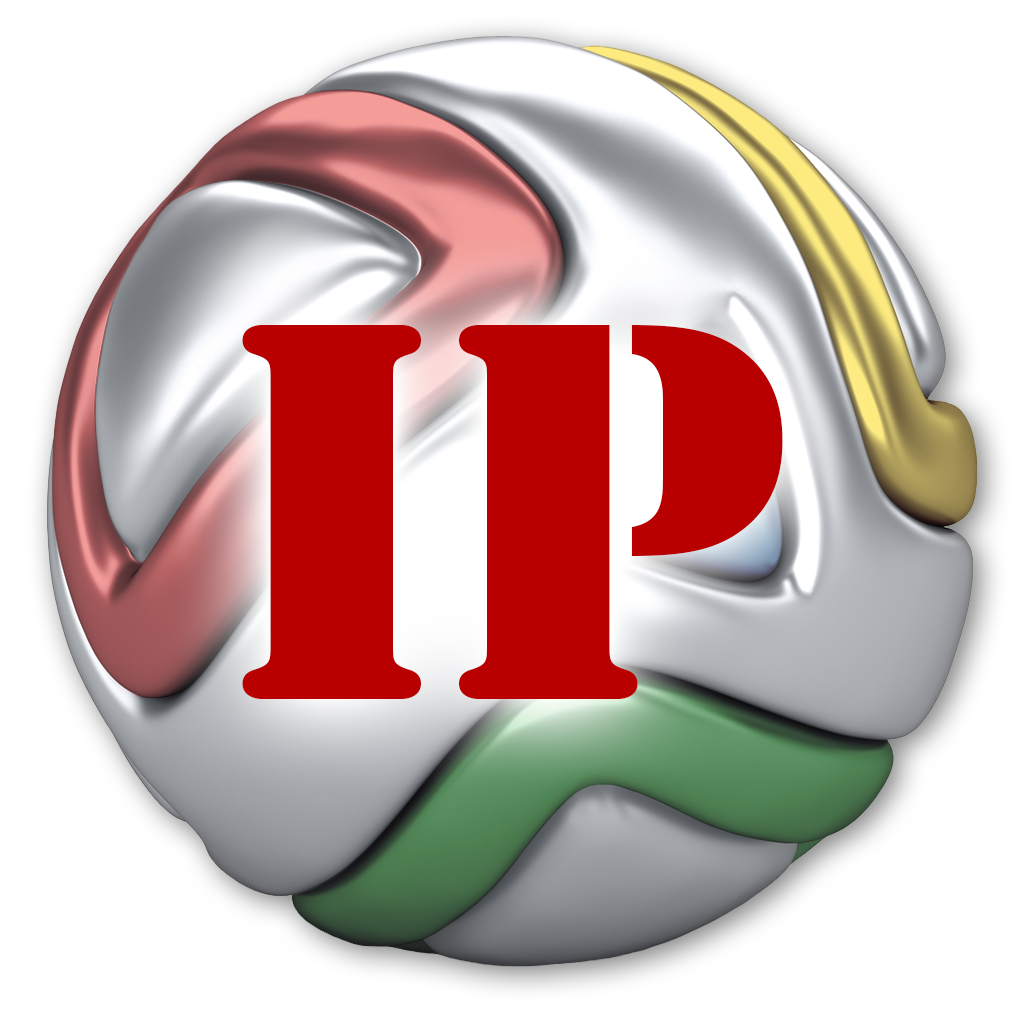
<style>
.page{position:relative;width:1024px;height:1024px;background:#ffffff}
.page>*{position:absolute;margin:0}
.t1{font:500px "StencilStd";color:#b90000}
</style>
<div class="page">
<p class="t1" style="left:242px;top:325px;width:541px;height:374px">IP</p>
</div>
